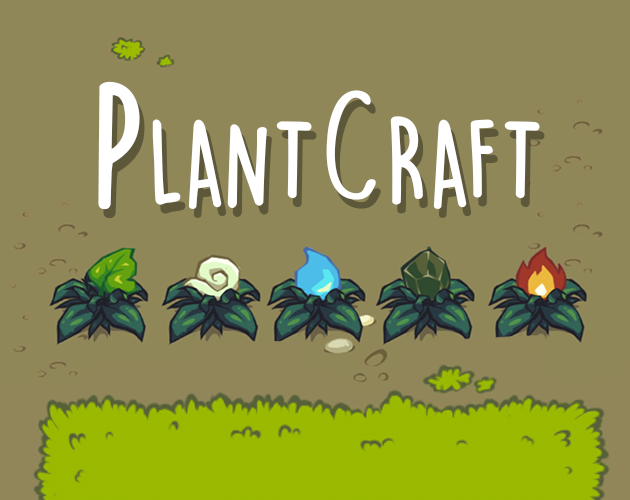
<style>
.page{position:relative;width:630px;height:500px;background:#908759}
.page>*{position:absolute;margin:0}
.t1{font:150px "DKLemonYellowSun";color:#ffffff;font-variant:small-caps;font-weight:bold}
</style>
<div class="page">
<p class="t1" style="left:98px;top:81px;width:442px;height:129px">PlantCraft</p>
</div>
